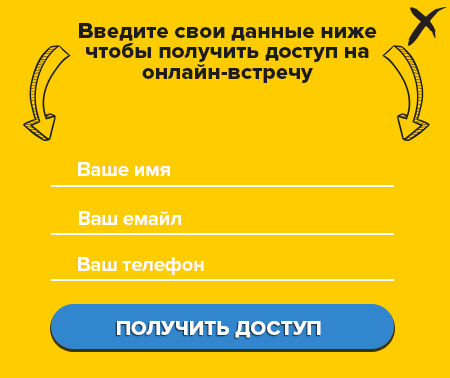
<style>
.page{position:relative;width:450px;height:378px;background:#ffcc00}
.page>*{position:absolute;margin:0}
.t1{font:22.6px/20.7px "ProximaNova-Extrabld";color:#1c1c1c}
.t2{font:20.7px "ProximaNova-Bold";letter-spacing:-0.02em;color:#ffffff}
.t3{font:20.7px "ProximaNova-Extrabld";color:#ffffff;text-transform:uppercase}
</style>
<div class="page">
<p class="t1" style="left:79px;top:23px;width:298px;height:60px;text-align:center">Введите свои данные ниже<br>чтобы получить доступ на<br>онлайн-встречу</p>
<p class="t2" style="left:78px;top:162px;width:92px;height:14px">Ваше имя</p>
<p class="t2" style="left:79px;top:211px;width:102px;height:14px">Ваш емайл</p>
<p class="t2" style="left:78px;top:257px;width:126px;height:18px">Ваш телефон</p>
<p class="t3" style="left:117px;top:321px;width:204px;height:17px">Получить доступ</p>
</div>
